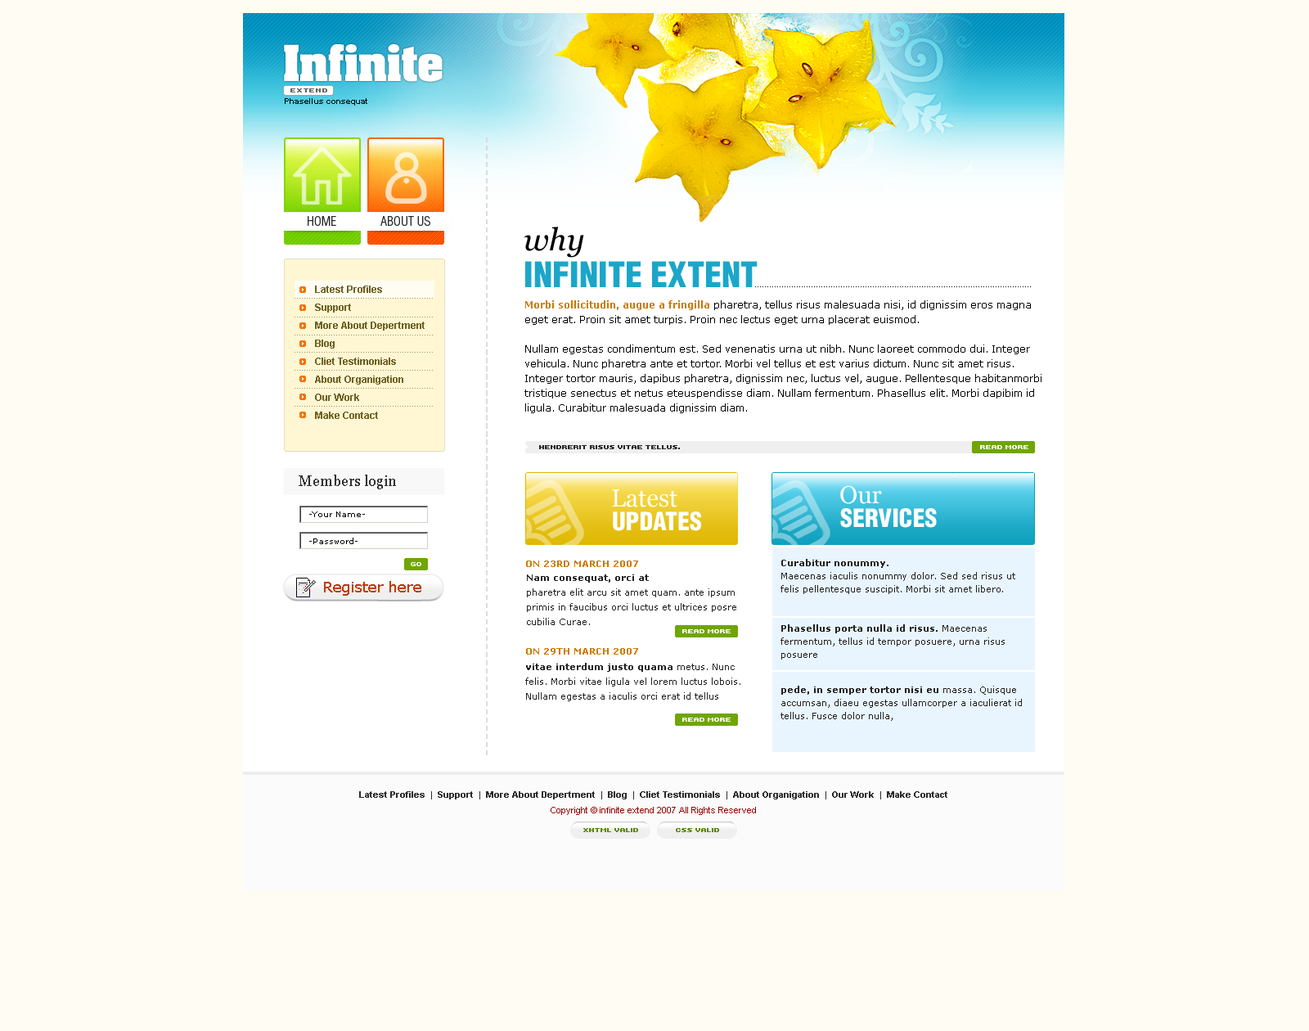
<style>
.page{position:relative;width:1309px;height:1031px;background:#fffcf4}
.page>*{position:absolute;margin:0}
.t1{font:42.5px "AachenBold";color:#ffffff}
.t2{font:6.5px "Kroeger0563";letter-spacing:0.1em;color:#636363;text-transform:uppercase}
.t3{font:8.2px "Arial-BoldMT";color:#000000}
.t4{font:13.1px "Helvetica-Condensed-Light";color:#292929;text-transform:uppercase}
.t5{font:34.4px/12.3px "Helvetica-Condensed-Black";color:#1ba6c9;text-transform:uppercase}
.t6{font:31.1px/12.3px "Georgia-Italic";color:#000000}
.t7{font:9.8px/18px "Arial-BoldMT";color:#706222}
.t8{font:9.8px/14.7px "Verdana";color:#000000}
.t9{font:9.8px/14.7px "Verdana-Bold";color:#cd7a00}
.t10{font:6.5px "Kroeger0563";color:#252525;text-transform:uppercase}
.t11{font:6.5px "Kroeger0563";color:#ffffff;text-transform:uppercase}
.t12{font:14.7px "Georgia";color:#313131}
.t13{font:24.5px "Georgia";color:#ffffff}
.t14{font:24.5px "Helvetica-Condensed-Black";color:#ffffff;text-transform:uppercase}
.t15{font:8.2px "Verdana";color:#000000}
.t16{font:9px "Verdana-Bold";color:#cd7a00;text-transform:uppercase}
.t17{font:9px/13.1px "Verdana";color:#222222}
.t18{font:9px/13.1px "Verdana-Bold";color:#222222}
.t19{font:14.7px "Verdana";color:#c13c00}
.t20{font:9px/14.7px "Verdana";color:#222222}
.t21{font:9px/14.7px "Verdana-Bold";color:#222222}
.t22{font:9px "Arial-BoldMT";color:#2c2c2c}
.t23{font:9px "ArialMT";color:#970000}
.t24{font:6.5px "Kroeger0563";color:#5a8701;text-transform:uppercase}
</style>
<div class="page">
<p class="t1" style="left:284px;top:44px;width:159px;height:38px">Infinite</p>
<p class="t2" style="left:290px;top:88px;width:37px;height:4px">extend</p>
<p class="t3" style="left:285px;top:98px;width:82px;height:8px">Phasellus consequat</p>
<p class="t4" style="left:308px;top:216px;width:28px;height:10px">home</p>
<p class="t4" style="left:380px;top:216px;width:50px;height:10px">about us</p>
<p class="t5" style="left:524px;top:227px;width:234px;height:60px"><span class="t6">why <br><br><br></span>infinite extent</p>
<p class="t7" style="left:315px;top:286px;width:110px;height:133px">Latest Profiles        <br>Support            <br>More About Depertment              <br>Blog            <br>Cliet Testimonials<br>About Organigation<br>Our Work<br>Make Contact</p>
<p class="t8" style="left:524px;top:300px;width:518px;height:113px"><span class="t9">Morbi sollicitudin, augue a fringilla</span> pharetra, tellus risus malesuada nisi, id dignissim eros magna eget erat. Proin sit amet turpis. Proin nec lectus eget urna placerat euismod. <br><br>Nullam egestas condimentum est. Sed venenatis urna ut nibh. Nunc laoreet commodo dui. Integer vehicula. Nunc pharetra ante et tortor. Morbi vel tellus et est varius dictum. Nunc sit amet risus. Integer tortor mauris, dapibus pharetra, dignissim nec, luctus vel, augue. Pellentesque habitanmorbi tristique senectus et netus eteuspendisse diam. Nullam fermentum. Phasellus elit. Morbi dapibim id ligula. Curabitur malesuada dignissim diam.</p>
<p class="t10" style="left:539px;top:445px;width:141px;height:4px">hendrerit risus vitae tellus.</p>
<p class="t11" style="left:980px;top:445px;width:48px;height:4px">read more</p>
<p class="t12" style="left:299px;top:475px;width:97px;height:14px">Members login</p>
<p class="t13" style="left:840px;top:485px;width:42px;height:19px">Our</p>
<p class="t13" style="left:612px;top:489px;width:65px;height:18px">Latest</p>
<p class="t14" style="left:840px;top:508px;width:97px;height:20px">services</p>
<p class="t15" style="left:309px;top:511px;width:56px;height:6px">-Your Name-</p>
<p class="t14" style="left:613px;top:511px;width:88px;height:20px">updates</p>
<p class="t15" style="left:309px;top:538px;width:49px;height:6px">-Password-</p>
<p class="t11" style="left:411px;top:562px;width:10px;height:4px">go</p>
<p class="t16" style="left:526px;top:560px;width:112px;height:7px">on 23rd march 2007</p>
<p class="t17" style="left:781px;top:559px;width:234px;height:100px"><span class="t18">Curabitur nonummy. <br></span>Maecenas iaculis nonummy dolor. Sed sed risus ut felis pellentesque suscipit. Morbi sit amet libero. <br><span class="t18"><br><br>Phasellus porta nulla id risus. </span>Maecenas fermentum, tellus id tempor posuere, urna risus posuere</p>
<p class="t19" style="left:324px;top:581px;width:97px;height:15px">Register here</p>
<p class="t20" style="left:527px;top:574px;width:209px;height:51px"><span class="t21">Nam consequat, orci at</span> <br>pharetra elit arcu sit amet quam. ante ipsum primis in faucibus orci luctus et ultrices posre cubilia Curae.</p>
<p class="t11" style="left:682px;top:629px;width:49px;height:4px">read more</p>
<p class="t16" style="left:526px;top:648px;width:112px;height:7px">on 29th march 2007</p>
<p class="t20" style="left:525px;top:663px;width:215px;height:38px"><span class="t21">vitae interdum justo quama </span>metus. Nunc felis. Morbi vitae ligula vel lorem luctus lobois. Nullam egestas a iaculis orci erat id tellus</p>
<p class="t17" style="left:781px;top:686px;width:241px;height:35px"><span class="t18">pede, in semper tortor nisi eu</span> massa. Quisque accumsan, diaeu egestas ullamcorper a iaculierat id tellus. Fusce dolor nulla,</p>
<p class="t11" style="left:682px;top:718px;width:49px;height:4px">read more</p>
<p class="t22" style="left:359px;top:791px;width:588px;height:8px">Latest Profiles  |  Support  |  More About Depertment  |  Blog  |  Cliet Testimonials  |  About Organigation  |  Our Work  |  Make Contact</p>
<p class="t23" style="left:551px;top:807px;width:205px;height:8px">Copyright © infinite extend 2007 All Rights Reserved</p>
<p class="t24" style="left:583px;top:828px;width:55px;height:4px">xhtml valid</p>
<p class="t24" style="left:676px;top:828px;width:43px;height:4px">css valid</p>
</div>
